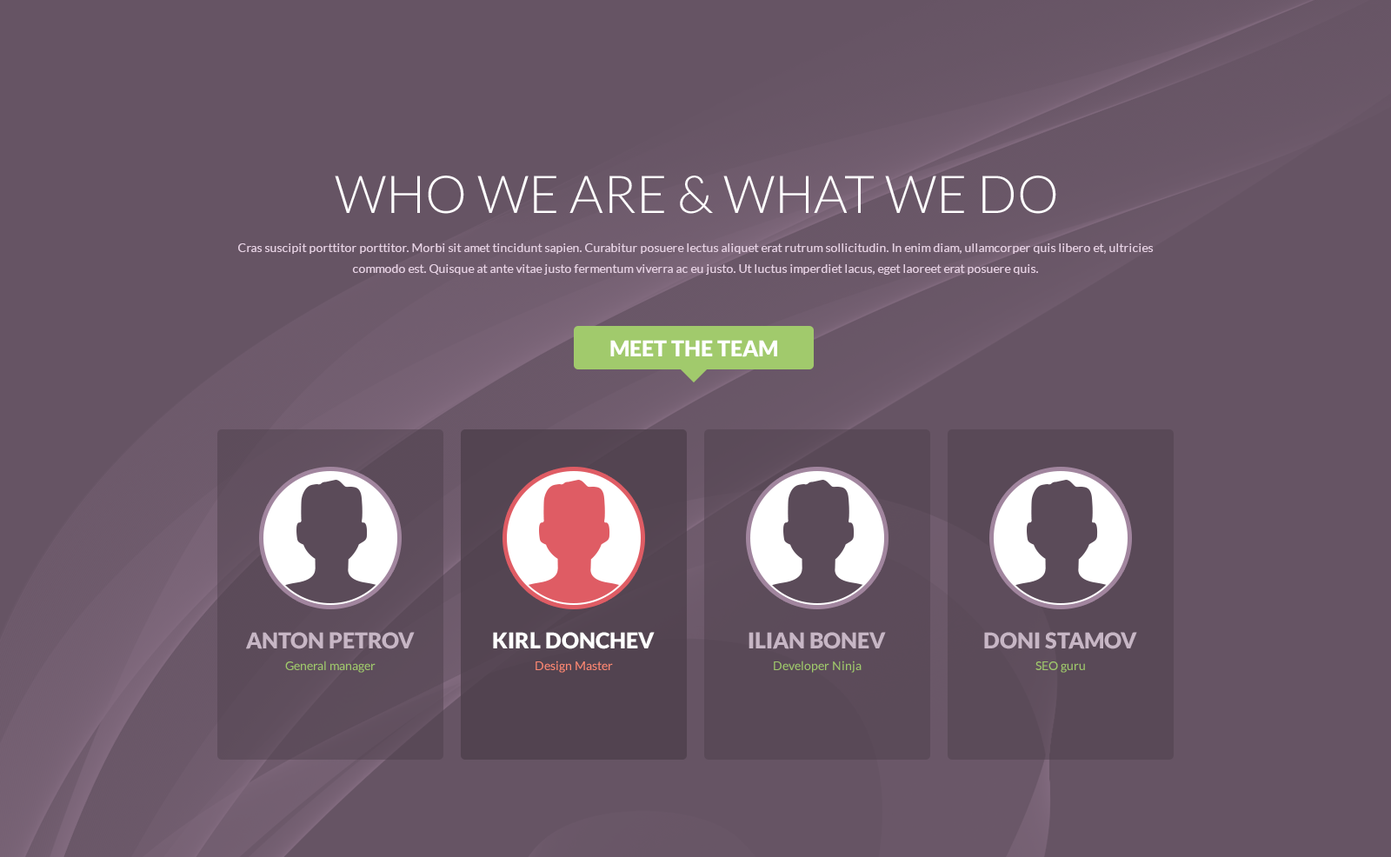
<style>
.page{position:relative;width:1391px;height:857px;background:#665464}
.page>*{position:absolute;margin:0}
.t1{font:52.2px "Lato-Light";color:#ffffff;text-transform:uppercase}
.t2{font:12.2px/20.9px "Lato-Regular";color:#e6d1e3}
.t3{font:21.7px "Lato-Black";color:#ffffff;text-transform:uppercase}
.t4{font:21.7px "Lato-Black";color:#c7b6c5;text-transform:uppercase}
.t5{font:12.2px "Lato-Regular";color:#a1ca6c}
.t6{font:12.2px "Lato-Regular";color:#ff8973}
</style>
<div class="page">
<p class="t1" style="left:335px;top:176px;width:721px;height:38px">Who we are &amp; what we do</p>
<p class="t2" style="left:238px;top:243px;width:916px;height:32px;text-align:center">Cras suscipit porttitor porttitor. Morbi sit amet tincidunt sapien. Curabitur posuere lectus aliquet erat rutrum sollicitudin. In enim diam, ullamcorper quis libero et, ultricies commodo est. Quisque at ante vitae justo fermentum viverra ac eu justo. Ut luctus imperdiet lacus, eget laoreet erat posuere quis.</p>
<p class="t3" style="left:610px;top:340px;width:167px;height:17px">Meet the team</p>
<p class="t4" style="left:246px;top:632px;width:169px;height:17px">Anton Petrov</p>
<p class="t3" style="left:493px;top:632px;width:162px;height:17px">Kirl DONCHEV</p>
<p class="t4" style="left:749px;top:632px;width:137px;height:17px">Ilian Bonev</p>
<p class="t4" style="left:984px;top:632px;width:153px;height:17px">Doni Stamov</p>
<p class="t5" style="left:285px;top:661px;width:91px;height:12px">General manager</p>
<p class="t6" style="left:536px;top:661px;width:77px;height:12px">Design Master</p>
<p class="t5" style="left:774px;top:661px;width:88px;height:12px">Developer Ninja</p>
<p class="t5" style="left:1035px;top:662px;width:50px;height:11px">SEO guru</p>
</div>
